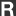
<style>
.page{position:relative;width:16px;height:16px;background:#333333}
.page>*{position:absolute;margin:0}
.t1{font:20px "HelveticaNeue-Bold";color:#ffffff}
</style>
<div class="page">
<p class="t1" style="left:1px;top:1px;width:13px;height:15px">R</p>
</div>
